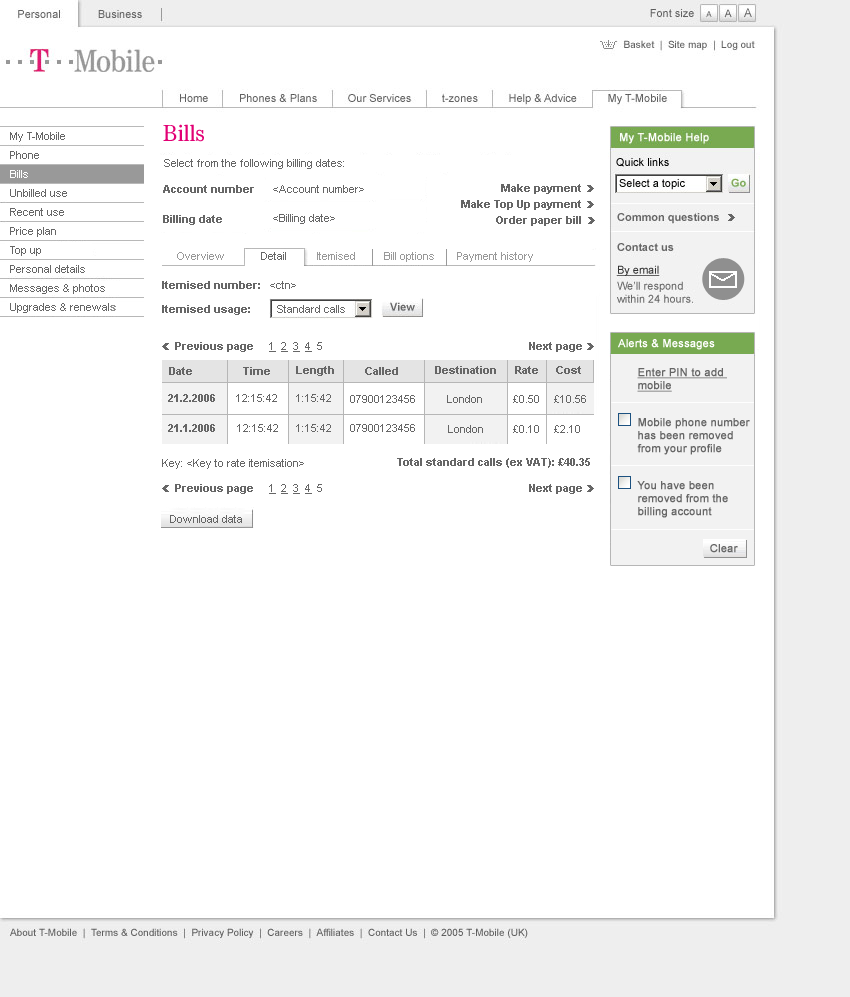
<style>
.page{position:relative;width:850px;height:997px;background:#ffffff}
.page>*{position:absolute;margin:0}
.t1{font:24px "Tele-Antiqua";color:#e20074}
.t2{font:11px/19px "ArialMT";color:#666666}
.t3{font:11px/19px "ArialMT";color:#ffffff}
.t4{font:11px/19px "ArialMT";color:#8f8f8f;font-weight:bold}
.t5{font:11px "ArialMT";color:#666666}
.t6{font:11px "Arial-BoldMT";color:#666666}
.t7{font:11px "ArialMT";color:#999999}
.t8{font:11px "ArialMT";color:#666666;text-decoration:underline}
.t9{font:11px "ArialMT";color:#ffffff;font-weight:bold}
.t10{font:11px "ArialMT";color:#666666;font-weight:bold;text-decoration:underline}
.t11{font:11px "ArialMT";color:#666666;font-weight:bold}
</style>
<div class="page">
<p class="t1" style="left:163px;top:124px;width:41px;height:18px">Bills</p>
<p class="t2" style="left:10px;top:132px;width:106px;height:181px">My T-Mobile<br>Phone<br><span class="t3">Bills<br></span>Unbilled use<br>Recent use<br>Price plan<br>Top up<br>Personal details<br>Messages &amp; photos<br>Upgrades &amp; renewal<span class="t4">s</span></p>
<p class="t5" style="left:164px;top:159px;width:180px;height:10px">Select from the following billing dates:</p>
<p class="t6" style="left:163px;top:185px;width:91px;height:8px">Account number</p>
<p class="t5" style="left:273px;top:185px;width:91px;height:8px">&lt;Account number&gt;</p>
<p class="t6" style="left:501px;top:184px;width:80px;height:10px">Make payment</p>
<p class="t6" style="left:461px;top:200px;width:120px;height:10px">Make Top Up payment</p>
<p class="t6" style="left:163px;top:215px;width:59px;height:10px">Billing date</p>
<p class="t5" style="left:273px;top:214px;width:62px;height:10px">&lt;Billing date&gt;</p>
<p class="t6" style="left:496px;top:216px;width:85px;height:10px">Order paper bill</p>
<p class="t7" style="left:177px;top:252px;width:47px;height:8px">Overview</p>
<p class="t5" style="left:261px;top:252px;width:25px;height:8px">Detail</p>
<p class="t7" style="left:317px;top:252px;width:38px;height:8px">Itemised</p>
<p class="t7" style="left:384px;top:252px;width:50px;height:10px">Bill options</p>
<p class="t7" style="left:457px;top:252px;width:76px;height:10px">Payment history</p>
<p class="t6" style="left:162px;top:281px;width:134px;height:8px">Itemised number:   <span class="t5">&lt;ctn&gt;</span></p>
<p class="t6" style="left:162px;top:305px;width:88px;height:10px">Itemised usage:</p>
<p class="t5" style="left:277px;top:305px;width:68px;height:8px">Standard calls</p>
<p class="t6" style="left:175px;top:342px;width:78px;height:10px">Previous page</p>
<p class="t8" style="left:269px;top:342px;width:53px;height:10px">1  2  3  4<span class="t5">  5</span></p>
<p class="t6" style="left:529px;top:342px;width:53px;height:10px">Next page</p>
<p class="t9" style="left:618px;top:339px;width:97px;height:11px">Alerts &amp; Messages</p>
<p class="t6" style="left:296px;top:366px;width:38px;height:10px">Length</p>
<p class="t6" style="left:435px;top:366px;width:61px;height:8px">Destination</p>
<p class="t6" style="left:515px;top:366px;width:23px;height:8px">Rate</p>
<p class="t6" style="left:556px;top:366px;width:25px;height:8px">Cost</p>
<p class="t6" style="left:169px;top:367px;width:23px;height:8px">Date</p>
<p class="t6" style="left:243px;top:367px;width:27px;height:8px">Time</p>
<p class="t6" style="left:365px;top:367px;width:33px;height:8px">Called</p>
<p class="t10" style="left:637px;top:368px;width:90px;height:24px">Enter PIN to add <br>mobile</p>
<p class="t6" style="left:168px;top:394px;width:47px;height:8px">21.2.2006</p>
<p class="t5" style="left:236px;top:394px;width:41px;height:8px">12:15:42</p>
<p class="t5" style="left:296px;top:394px;width:35px;height:8px">1:15:42</p>
<p class="t5" style="left:350px;top:395px;width:65px;height:8px">07900123456</p>
<p class="t5" style="left:447px;top:395px;width:35px;height:8px">London</p>
<p class="t5" style="left:513px;top:395px;width:26px;height:8px">£0.50</p>
<p class="t5" style="left:554px;top:395px;width:32px;height:8px">£10.56</p>
<p class="t6" style="left:168px;top:424px;width:47px;height:8px">21.1.2006</p>
<p class="t5" style="left:237px;top:424px;width:41px;height:8px">12:15:42</p>
<p class="t5" style="left:296px;top:424px;width:35px;height:8px">1:15:42</p>
<p class="t5" style="left:350px;top:424px;width:65px;height:8px">07900123456</p>
<p class="t5" style="left:448px;top:425px;width:35px;height:8px">London</p>
<p class="t5" style="left:513px;top:425px;width:26px;height:8px">£0.10</p>
<p class="t5" style="left:554px;top:425px;width:26px;height:8px">£2.10</p>
<p class="t11" style="left:637px;top:418px;width:113px;height:37px">Mobile phone number <br>has been removed <br>from your profile</p>
<p class="t5" style="left:162px;top:459px;width:142px;height:10px">Key: &lt;Key to rate itemisation&gt;</p>
<p class="t6" style="left:397px;top:458px;width:193px;height:10px">Total standard calls (ex VAT): £40.35</p>
<p class="t6" style="left:175px;top:484px;width:78px;height:10px">Previous page</p>
<p class="t8" style="left:269px;top:484px;width:53px;height:10px">1  2  3  4<span class="t5">  5</span></p>
<p class="t6" style="left:529px;top:484px;width:53px;height:10px">Next page</p>
<p class="t11" style="left:637px;top:481px;width:91px;height:37px">You have been <br>removed from the <br>billing account</p>
<p class="t5" style="left:170px;top:515px;width:72px;height:8px">Download data</p>
<p class="t11" style="left:710px;top:544px;width:28px;height:9px">Clear</p>
</div>
